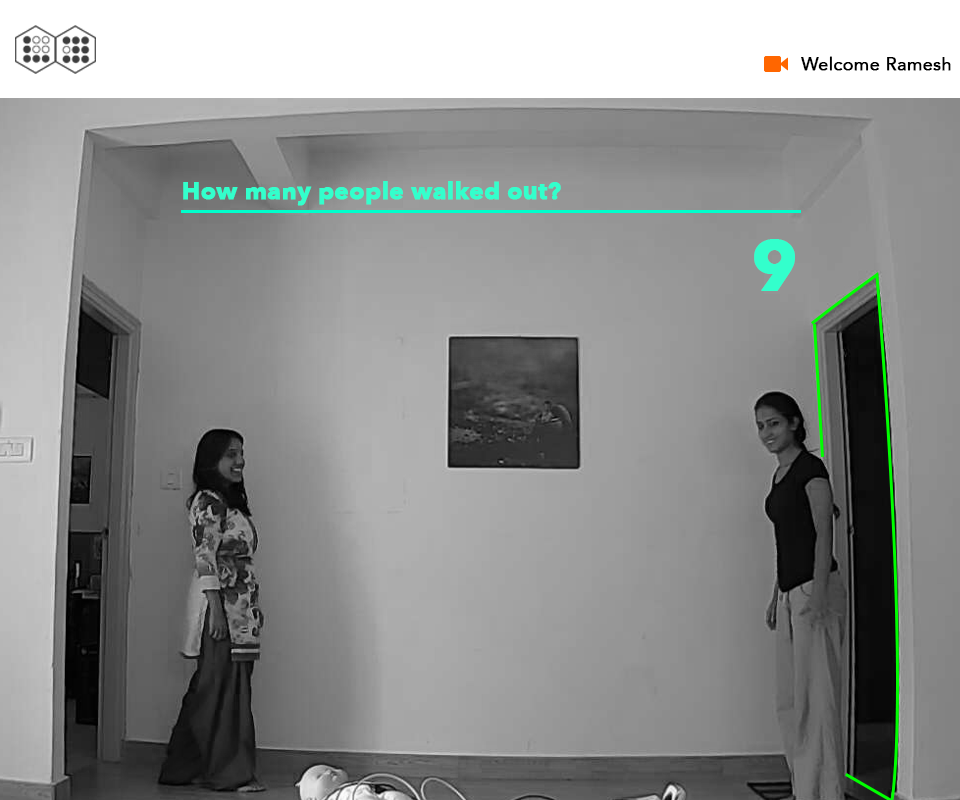
<style>
.page{position:relative;width:960px;height:800px}
.page>*{position:absolute;margin:0}
.t1{font:18px "Avenir-Roman";color:#000000;font-weight:bold}
.t2{font:24px "AvenirNext-Bold";color:#33ffcc;font-weight:bold}
.t3{font:70px "AvenirNext-Bold";color:#33ffcc;font-weight:bold}
</style>
<div class="page">
<p class="t1" style="left:801px;top:56px;width:150px;height:15px">Welcome Ramesh</p>
<p class="t2" style="left:183px;top:181px;width:378px;height:25px">How many people walked out?</p>
<p class="t3" style="left:754px;top:239px;width:41px;height:52px">9</p>
</div>
